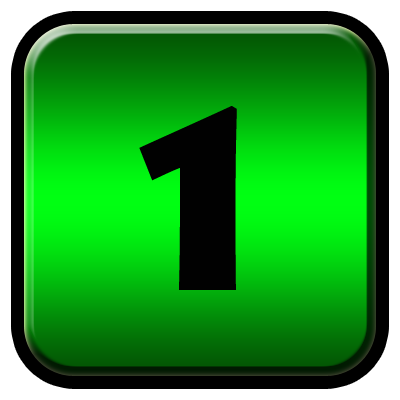
<style>
.page{position:relative;width:400px;height:400px}
.page>*{position:absolute;margin:0}
.t1{font:250px "LithosPro-Black";letter-spacing:-0.04em;color:#010101}
</style>
<div class="page">
<p class="t1" style="left:139px;top:106px;width:98px;height:184px">1</p>
</div>
